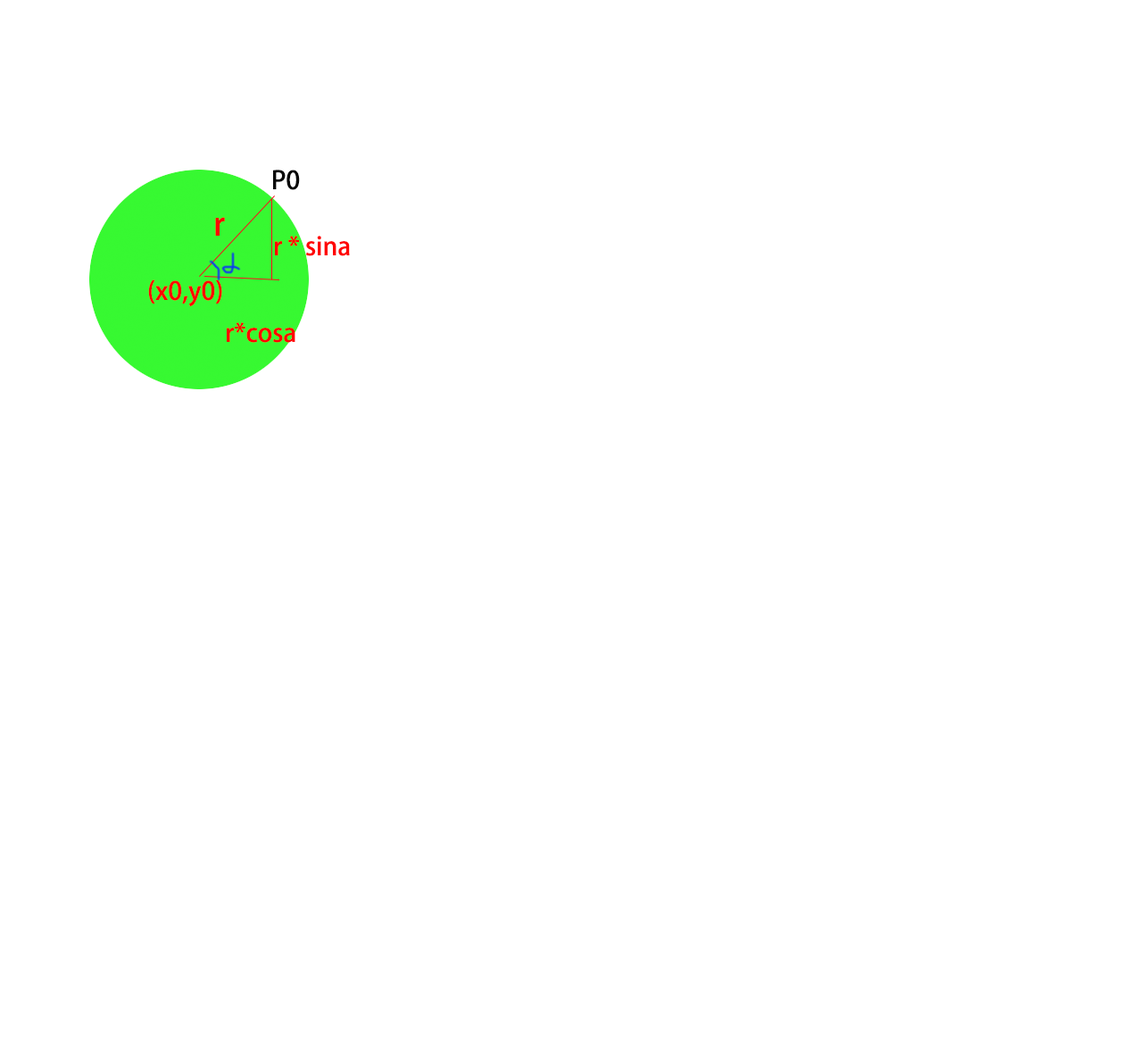
<style>
.page{position:relative;width:1146px;height:1041px;background:#ffffff}
.page>*{position:absolute;margin:0}
.t1{font:25px "AdobeHeitiStd-Regular";color:#060606}
.t2{font:32.1px "AdobeHeitiStd-Regular";color:#ff0303}
.t3{font:25px "AdobeHeitiStd-Regular";color:#ff0303}
</style>
<div class="page">
<p class="t1" style="left:273px;top:170px;width:27px;height:20px">P0</p>
<p class="t2" style="left:215px;top:217px;width:10px;height:19px">r</p>
<p class="t3" style="left:274px;top:236px;width:76px;height:20px">r * sina</p>
<p class="t3" style="left:148px;top:279px;width:74px;height:27px">(x0,y0)</p>
<p class="t3" style="left:226px;top:322px;width:69px;height:21px">r*cosa</p>
</div>
